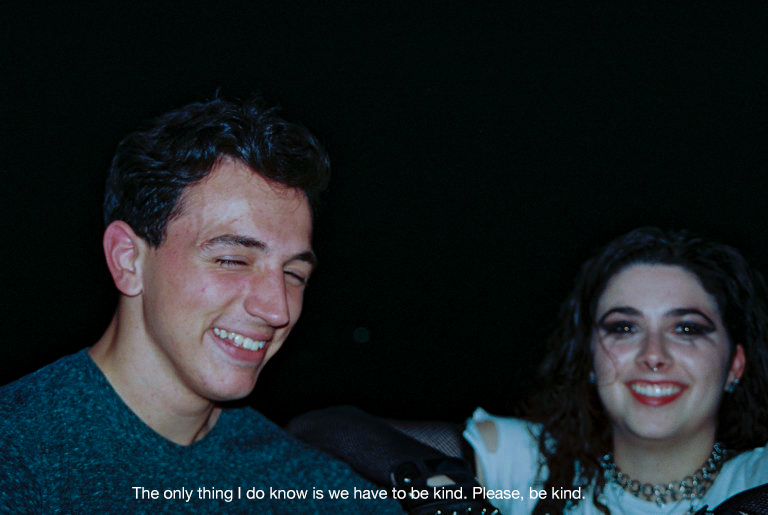
<style>
.page{position:relative;width:768px;height:515px}
.page>*{position:absolute;margin:0}
.t1{font:16px "HelveticaNeue";color:#ffffff}
</style>
<div class="page">
<p class="t1" style="left:132px;top:487px;width:453px;height:15px">The only thing I do know is we have to be kind. Please, be kind.</p>
</div>
